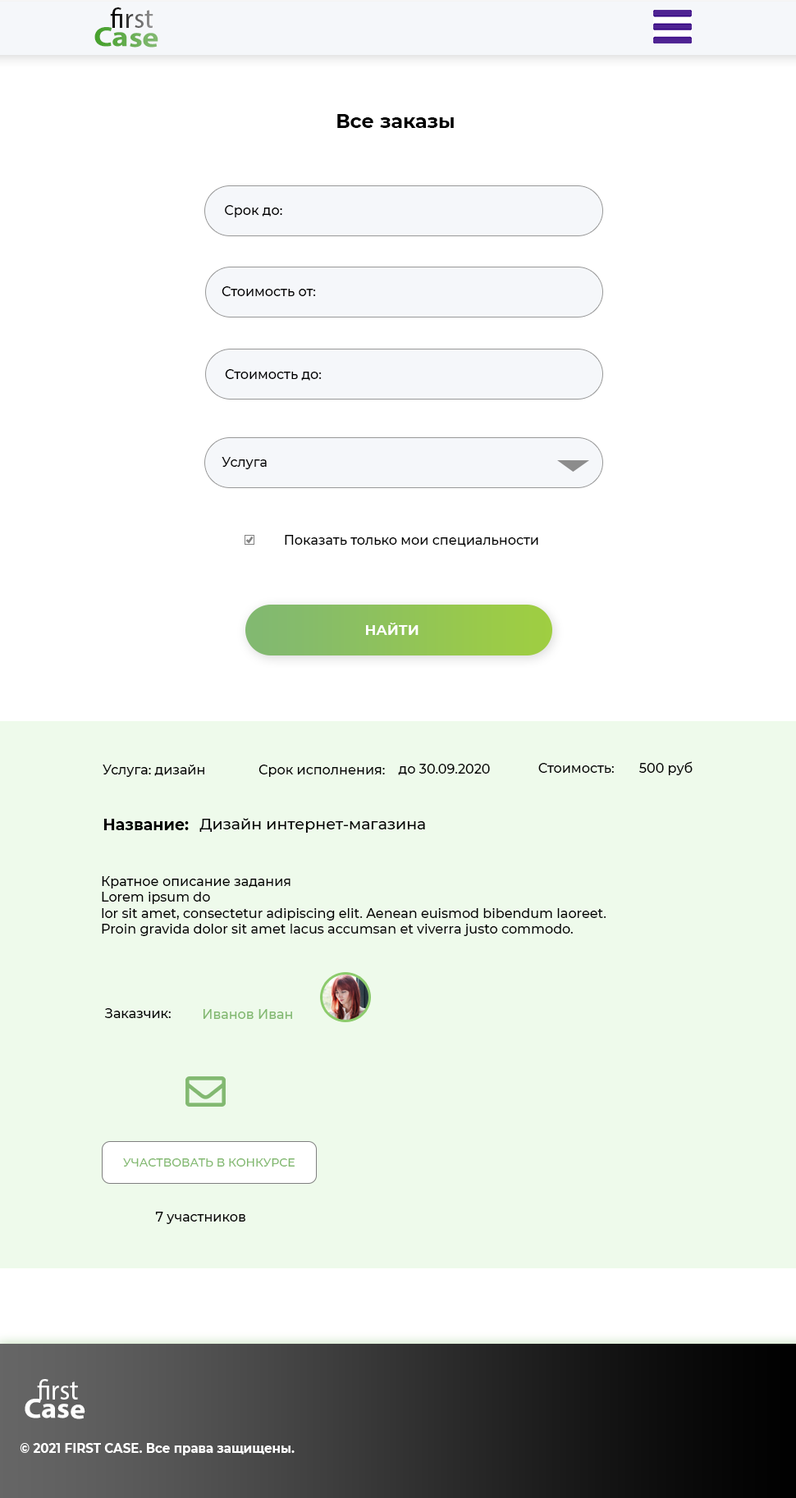
<style>
.page{position:relative;width:796px;height:1498px;background:#ffffff}
.page>*{position:absolute;margin:0}
.t1{font:27.9px "MyriadPro-Regular"}
.t2{font:27.9px "MyriadPro-Bold";scale:1.13 1}
.t3{font:27.9px "MyriadPro-Regular";scale:1.13 1}
.t4{font:19.7px "Montserrat-Bold";color:#000000}
.t5{font:13.1px "Montserrat-Medium";color:#000000}
.t6{font:13.9px "Montserrat-Bold";color:#ffffff;text-transform:uppercase}
.t7{font:15.6px "Montserrat-Bold";color:#000000}
.t8{font:15.6px "Montserrat-Medium";color:#000000}
.t9{font:13.1px "Montserrat-Medium";color:#82b971}
.t10{font:11.5px "Montserrat-Medium";color:#82b970;text-transform:uppercase}
.t11{font:27.9px "MyriadPro-Regular";color:#ffffff;scale:0.94 1}
.t12{font:27.9px "MyriadPro-Bold";color:#ffffff;scale:1.06 1}
.t13{font:27.9px "MyriadPro-Regular";color:#ffffff;scale:1.06 1}
.t14{font:13.1px "Montserrat-Bold";color:#ffffff;scale:0.94 1}
</style>
<div class="page">
<p class="t1" style="left:110px;top:7px;width:43px;height:21px">first</p>
<p class="t2" style="left:94px;top:27px;width:64px;height:21px;rotate:1deg"><span class="t3">       </span>Case</p>
<p class="t4" style="left:337px;top:114px;width:117px;height:14px">Все заказы</p>
<p class="t5" style="left:225px;top:205px;width:57px;height:12px">Срок до:</p>
<p class="t5" style="left:222px;top:286px;width:94px;height:10px">Стоимость от:</p>
<p class="t5" style="left:225px;top:369px;width:97px;height:12px">Стоимость до:</p>
<p class="t5" style="left:222px;top:457px;width:45px;height:12px">Услуга</p>
<p class="t5" style="left:285px;top:535px;width:253px;height:12px">Показать только мои специальности</p>
<p class="t6" style="left:366px;top:623px;width:52px;height:12px">найти</p>
<p class="t5" style="left:639px;top:761px;width:54px;height:14px">500 руб</p>
<p class="t5" style="left:103px;top:765px;width:101px;height:12px">Услуга: дизайн</p>
<p class="t5" style="left:258px;top:765px;width:127px;height:12px">Срок исполнения:</p>
<p class="t5" style="left:398px;top:764px;width:92px;height:11px">до 30.09.2020</p>
<p class="t5" style="left:538px;top:763px;width:76px;height:10px">Стоимость:</p>
<p class="t7" style="left:103px;top:819px;width:86px;height:11px">Название:</p>
<p class="t8" style="left:199px;top:818px;width:226px;height:15px">Дизайн интернет-магазина</p>
<p class="t5" style="left:102px;top:876px;width:504px;height:60px">Кратное описание задания<br>Lorem ipsum do<br>lor sit amet, consectetur adipiscing elit. Aenean euismod bibendum laoreet. Proin gravida dolor sit amet lacus accumsan et viverra justo commodo.</p>
<p class="t5" style="left:105px;top:1008px;width:66px;height:10px">Заказчик:</p>
<p class="t9" style="left:203px;top:1009px;width:89px;height:10px">Иванов Иван</p>
<p class="t10" style="left:123px;top:1159px;width:172px;height:8px">Участвовать в конкурсе</p>
<p class="t5" style="left:155px;top:1212px;width:90px;height:12px">7 участников</p>
<p class="t11" style="left:37px;top:1379px;width:41px;height:21px">first</p>
<p class="t12" style="left:25px;top:1399px;width:60px;height:20px;rotate:1deg"><span class="t13">       </span>Case</p>
<p class="t14" style="left:20px;top:1443px;width:275px;height:13px">© 2021 FIRST CASE. Все права защищены.</p>
</div>
